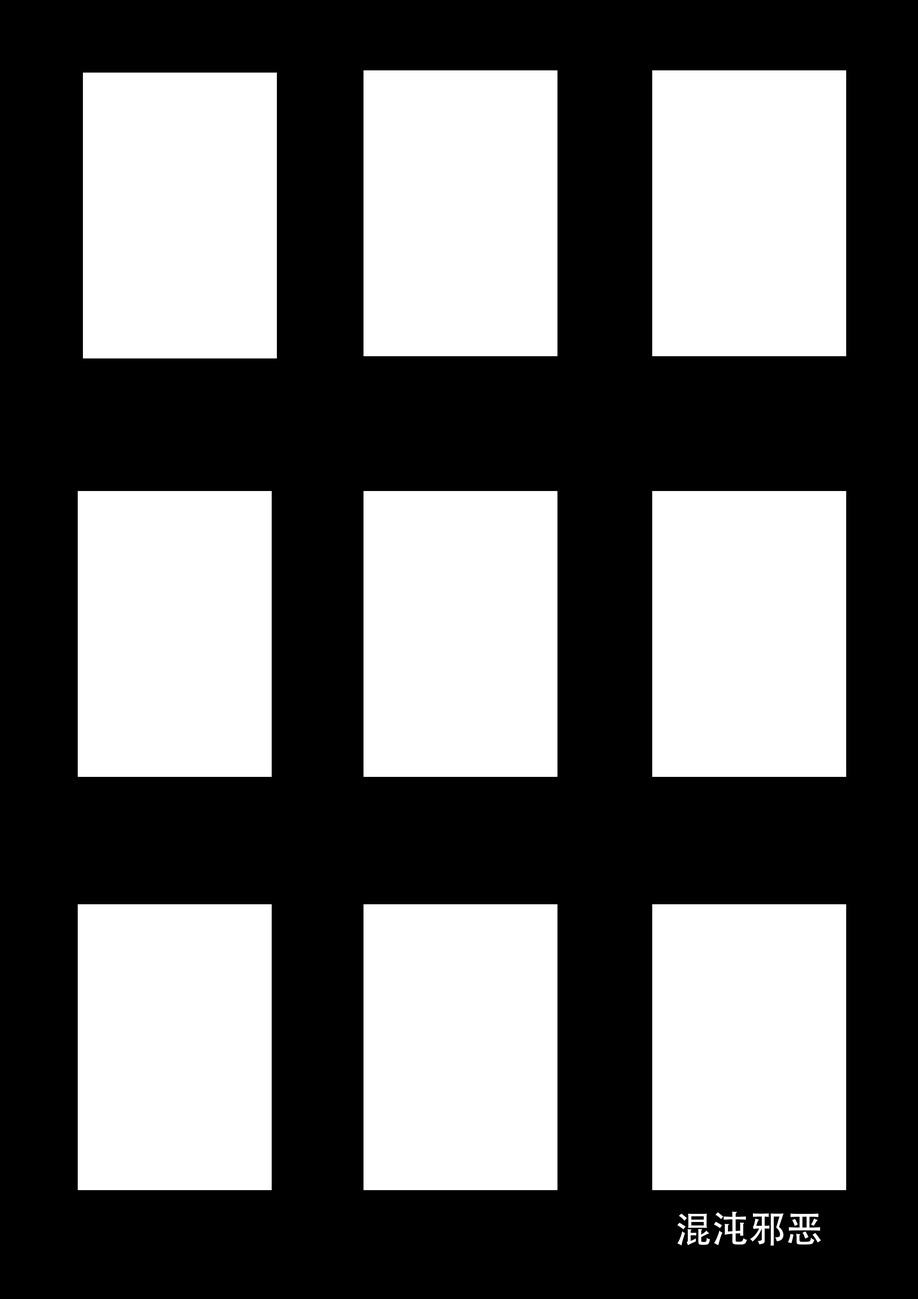
<style>
.page{position:relative;width:918px;height:1299px;background:#000000}
.page>*{position:absolute;margin:0}
.t1{font:37px "AdobeHeitiStd-Regular";color:#fffefe}
</style>
<div class="page">
<p class="t1" style="left:678px;top:1211px;width:143px;height:34px">混沌邪恶</p>
</div>
